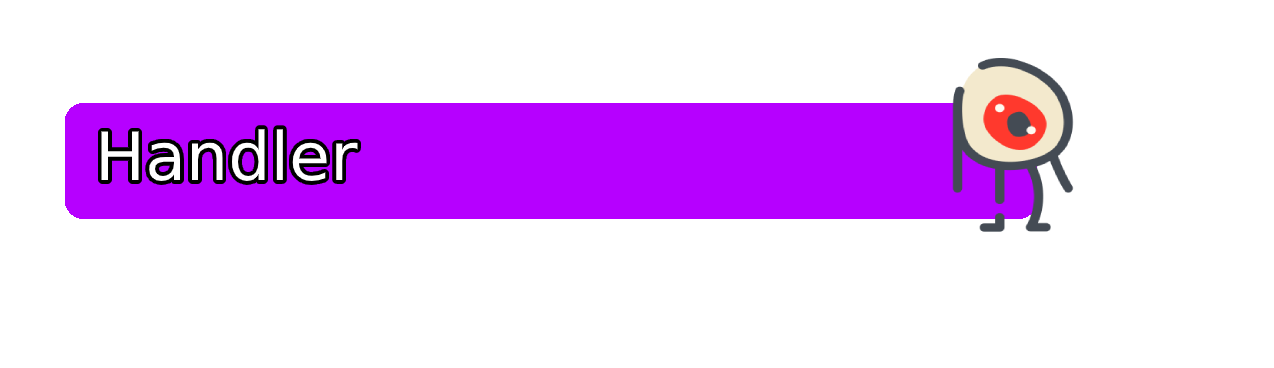
<style>
.page{position:relative;width:1274px;height:368px;background:#ffffff}
.page>*{position:absolute;margin:0}
.t1{font:66.7px "Bahnschrift";color:#ffffff}
</style>
<div class="page">
<p class="t1" style="left:101px;top:129px;width:257px;height:52px">Handler</p>
</div>
